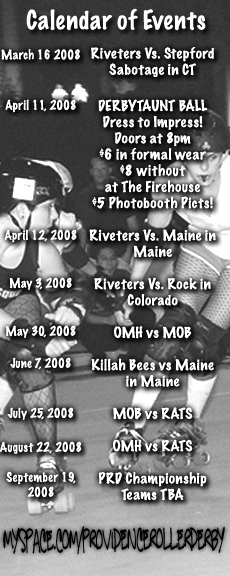
<style>
.page{position:relative;width:230px;height:576px}
.page>*{position:absolute;margin:0}
.t1{font:24px "MarkerFelt-Thin";color:#feffff}
.t2{font:12px/17px "MarkerFelt-Thin";color:#feffff}
.t3{font:12px "MarkerFelt-Thin";color:#feffff}
.t4{font:12px/18px "MarkerFelt-Thin";color:#feffff}
.t5{font:12px/20px "MarkerFelt-Thin";color:#feffff}
.t6{font:12px/24px "MarkerFelt-Thin";color:#feffff}
.t7{font:12px/16px "MarkerFelt-Thin";color:#feffff}
.t8{font:12px/15px "MarkerFelt-Thin";color:#feffff}
.t9{font:13.5px "MarkerFelt-Thin";color:#feffff;scale:1.09 1}
.t10{font:13.5px/20px "MarkerFelt-Thin";color:#feffff;scale:1.09 1}
.t11{font:31px "GregsOtherHand";color:#000000;scale:0.49 1}
</style>
<div class="page">
<p class="t1" style="left:26px;top:8px;width:180px;height:23px">Calendar of Events</p>
<p class="t2" style="left:0px;top:49px;width:82px;height:448px;text-align:center"><span class="t3">March 16 2008<br><br></span><span class="t4"><br>April 11, 2008<br><br><br><br><br><br><br></span><span class="t5"><br>April 12, 2008<br></span><span class="t6"><br>May 3, 2008<br><br>May 30, 2008<br></span><span class="t7"><br>June 7, 2008<br><br></span><br>July 25, 2008<br><br>August 22, 2008<br><span class="t8"><br>September 19, 2008</span></p>
<p class="t9" style="left:89px;top:47px;width:127px;height:454px;text-align:center">Riveters Vs. Stepford Sabotage in CT<br><br><span class="t10">DERBYTAUNT BALL<br></span>Dress to Impress!<br>Doors at 8pm<br>$6 in formal wear<br>$8 without<br>at The Firehouse<br>$5 Photobooth Picts!<br><br>Riveters Vs. Maine in Maine<br><br>Riveters Vs. Rock in Colorado<br><br>OMH vs MOB<br><br>Killah Bees vs Maine in Maine<br><br>MOB vs RATS<br><br>OMH vs RATS<br><br>PRD Championship<br>Teams TBA</p>
<p class="t11" style="left:3px;top:526px;width:222px;height:29px">Myspace.com/Providencerollerderby</p>
</div>
